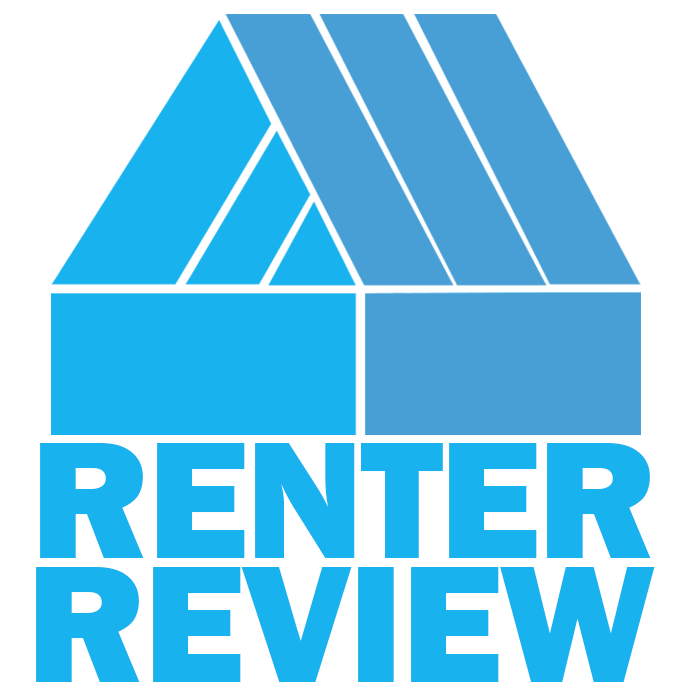
<style>
.page{position:relative;width:692px;height:692px;background:#ffffff}
.page>*{position:absolute;margin:0}
.t1{font:173.3px "FranklinGothic-Heavy";letter-spacing:-0.02em;color:#18b2ee}
</style>
<div class="page">
<p class="t1" style="left:40px;top:443px;width:611px;height:115px">RENTER</p>
<p class="t1" style="left:36px;top:567px;width:619px;height:115px">REVIEW</p>
</div>
